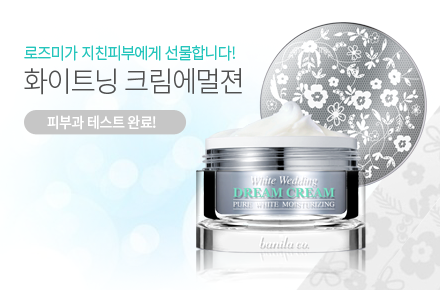
<style>
.page{position:relative;width:440px;height:290px;background:#ffffff}
.page>*{position:absolute;margin:0}
.t1{font:16.2px "NotoSansCJKkr-DemiLight";letter-spacing:-0.05em;color:#25c5bc;scale:0.95 1}
.t2{font:28.8px "NotoSansCJKkr-Light";letter-spacing:-0.05em;color:#515151;scale:0.95 1}
.t3{font:15px "NotoSansCJKkr-Medium";letter-spacing:-0.05em;color:#ffffff;scale:0.95 1}
</style>
<div class="page">
<p class="t1" style="left:24px;top:45px;width:211px;height:16px">로즈미가 지친피부에게 선물합니다!</p>
<p class="t2" style="left:24px;top:68px;width:218px;height:27px">화이트닝 크림에멀젼</p>
<p class="t3" style="left:47px;top:115px;width:109px;height:15px">피부과 테스트 완료!</p>
</div>
